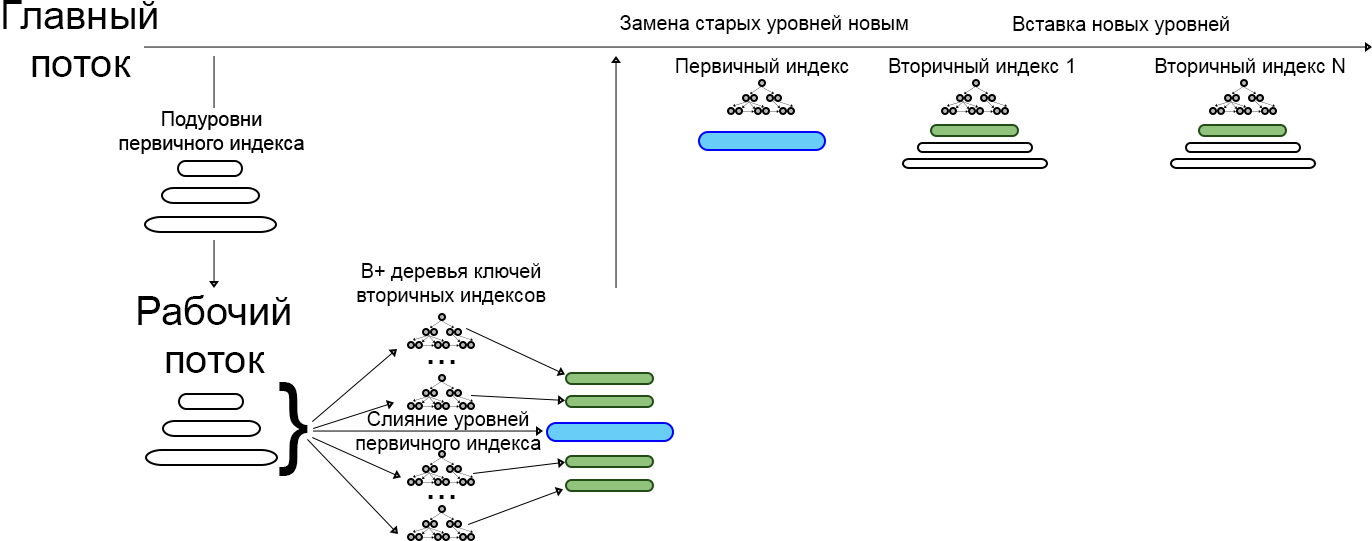
<style>
.page{position:relative;width:1372px;height:541px;background:#ffffff}
.page>*{position:absolute;margin:0}
.t1{font:40px "ArialMT";color:#000000}
.t2{font:20px "ArialMT";color:#000000}
.t3{font:100px "ArialMT";color:#000000}
</style>
<div class="page">
<p class="t1" style="left:3px;top:0px;width:154px;height:77px;text-align:center">Главный<br>поток</p>
<p class="t2" style="left:620px;top:15px;width:288px;height:19px">Замена старых уровней новым</p>
<p class="t2" style="left:1013px;top:16px;width:216px;height:19px">Вставка новых уровней</p>
<p class="t2" style="left:676px;top:58px;width:173px;height:19px">Первичный индекс</p>
<p class="t2" style="left:889px;top:58px;width:184px;height:19px">Вторичный индекс 1</p>
<p class="t2" style="left:1155px;top:58px;width:190px;height:19px">Вторичный индекс N</p>
<p class="t2" style="left:119px;top:111px;width:185px;height:43px;text-align:center">Подуровни<br>первичного индекса</p>
<p class="t2" style="left:357px;top:263px;width:189px;height:43px;text-align:center">B+ деревья ключей<br>вторичных индексов</p>
<p class="t1" style="left:138px;top:295px;width:152px;height:78px;text-align:center">Рабочий<br>поток</p>
<p class="t1" style="left:428px;top:360px;width:27px;height:4px">...</p>
<p class="t3" style="left:279px;top:382px;width:29px;height:94px">}</p>
<p class="t2" style="left:356px;top:411px;width:185px;height:43px;text-align:center">Слияние уровней<br>первичного индекса</p>
<p class="t1" style="left:428px;top:495px;width:27px;height:4px">...</p>
</div>
